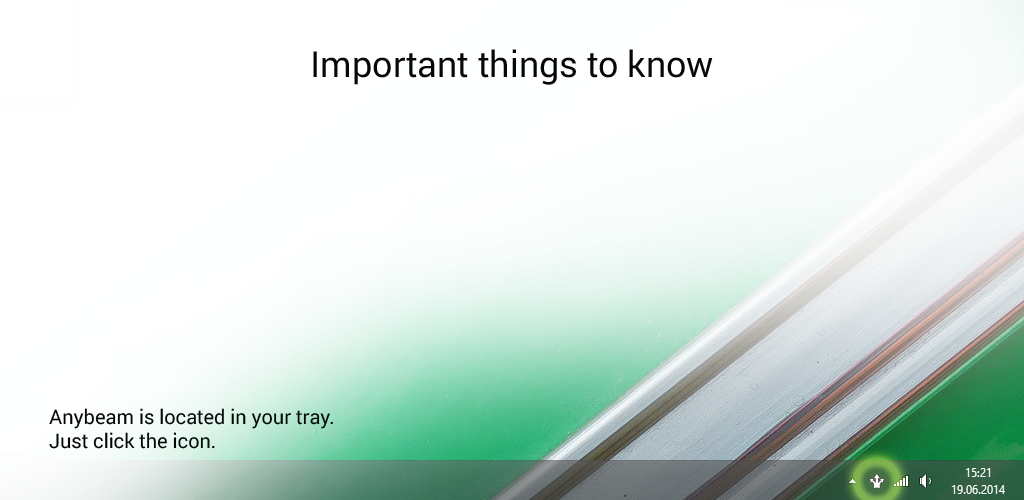
<style>
.page{position:relative;width:1024px;height:500px;background:#fefffe}
.page>*{position:absolute;margin:0}
.t1{font:36px "Roboto-Regular";color:#060606}
.t2{font:20px "Roboto-Regular";color:#060606}
</style>
<div class="page">
<p class="t1" style="left:313px;top:49px;width:400px;height:36px">Important things to know</p>
<p class="t2" style="left:49px;top:408px;width:284px;height:41px">Anybeam is located in your tray.<br>Just click the icon.</p>
</div>
